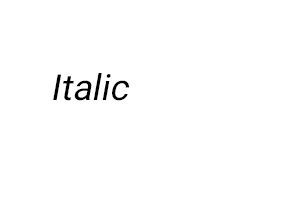
<style>
.page{position:relative;width:300px;height:200px;background:#ffffff}
.page>*{position:absolute;margin:0}
.t1{font:36px "Roboto-Regular";color:#000000;font-style:italic}
</style>
<div class="page">
<p class="t1" style="left:53px;top:73px;width:76px;height:28px">Italic</p>
</div>
